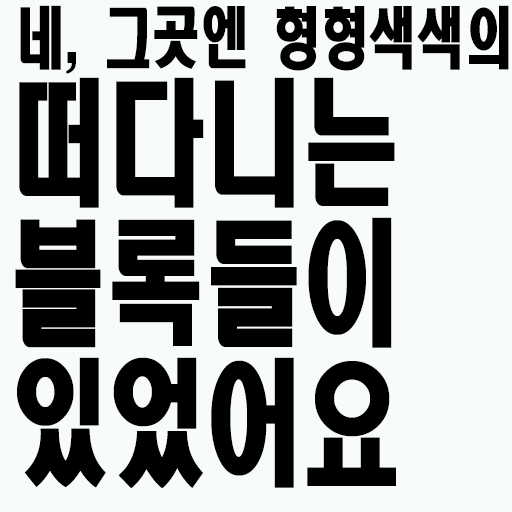
<style>
.page{position:relative;width:512px;height:512px;background:#f8fcf8}
.page>*{position:absolute;margin:0}
.t1{font:66.6px "HeadlineR-HM";color:#000000;scale:0.72 1}
.t2{font:135px/140px "HeadlineR-HM";color:#000000;scale:0.72 1}
</style>
<div class="page">
<p class="t1" style="left:20px;top:5px;width:489px;height:69px">네, 그곳엔 형형색색의</p>
<p class="t2" style="left:15px;top:77px;width:381px;height:412px">떠다니는<br>블록들이<br>있었어요</p>
</div>
